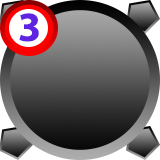
<style>
.page{position:relative;width:160px;height:160px}
.page>*{position:absolute;margin:0}
.t1{font:41.7px "MyriadPro-Bold";color:#5e24e2}
</style>
<div class="page">
<p class="t1" style="left:19px;top:13px;width:20px;height:29px">3</p>
</div>
